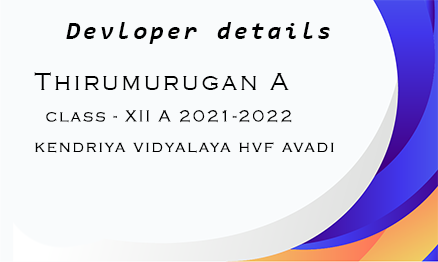
<style>
.page{position:relative;width:438px;height:262px;background:#f9fbfc}
.page>*{position:absolute;margin:0}
.t1{font:25px "Consolas-BoldItalic";letter-spacing:0.12em;color:#000000}
.t2{font:25px "CopperplateGothic-Light";letter-spacing:0.12em;color:#000000}
.t3{font:16.7px "CopperplateGothic-Light";letter-spacing:0.12em;color:#000000}
</style>
<div class="page">
<p class="t1" style="left:66px;top:22px;width:264px;height:22px">Devloper details</p>
<p class="t2" style="left:34px;top:72px;width:255px;height:18px">Thirumurugan A</p>
<p class="t3" style="left:46px;top:110px;width:246px;height:13px">class - XII A 2021-2022</p>
<p class="t3" style="left:35px;top:142px;width:299px;height:11px">kendriya vidyalaya hvf avadi</p>
</div>
